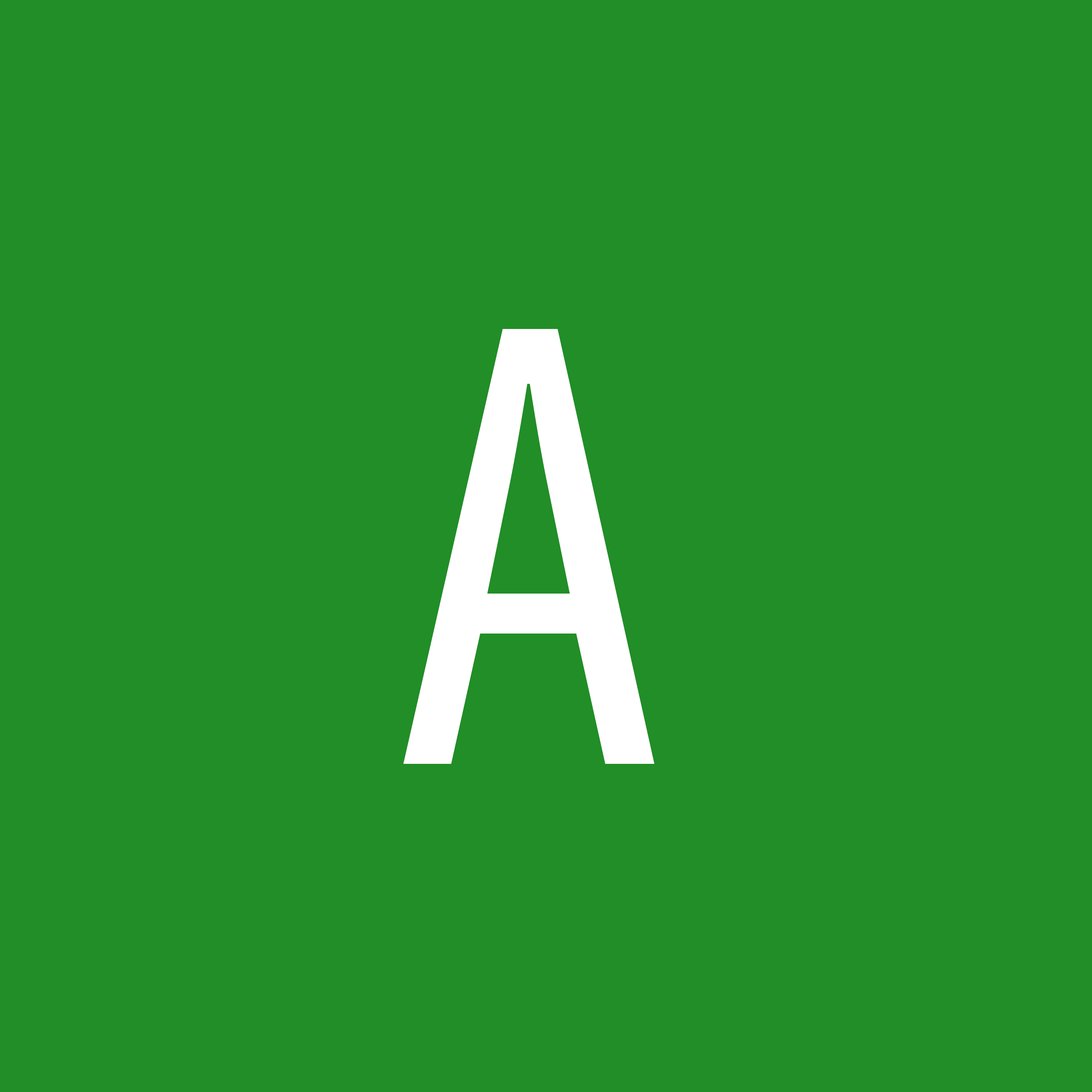
<style>
.page{position:relative;width:1092px;height:1092px;background:#218e27}
.page>*{position:absolute;margin:0}
.t1{font:645.1px "MyriadPro-Cond";color:#ffffff}
</style>
<div class="page">
<p class="t1" style="left:403px;top:329px;width:251px;height:435px">A</p>
</div>
